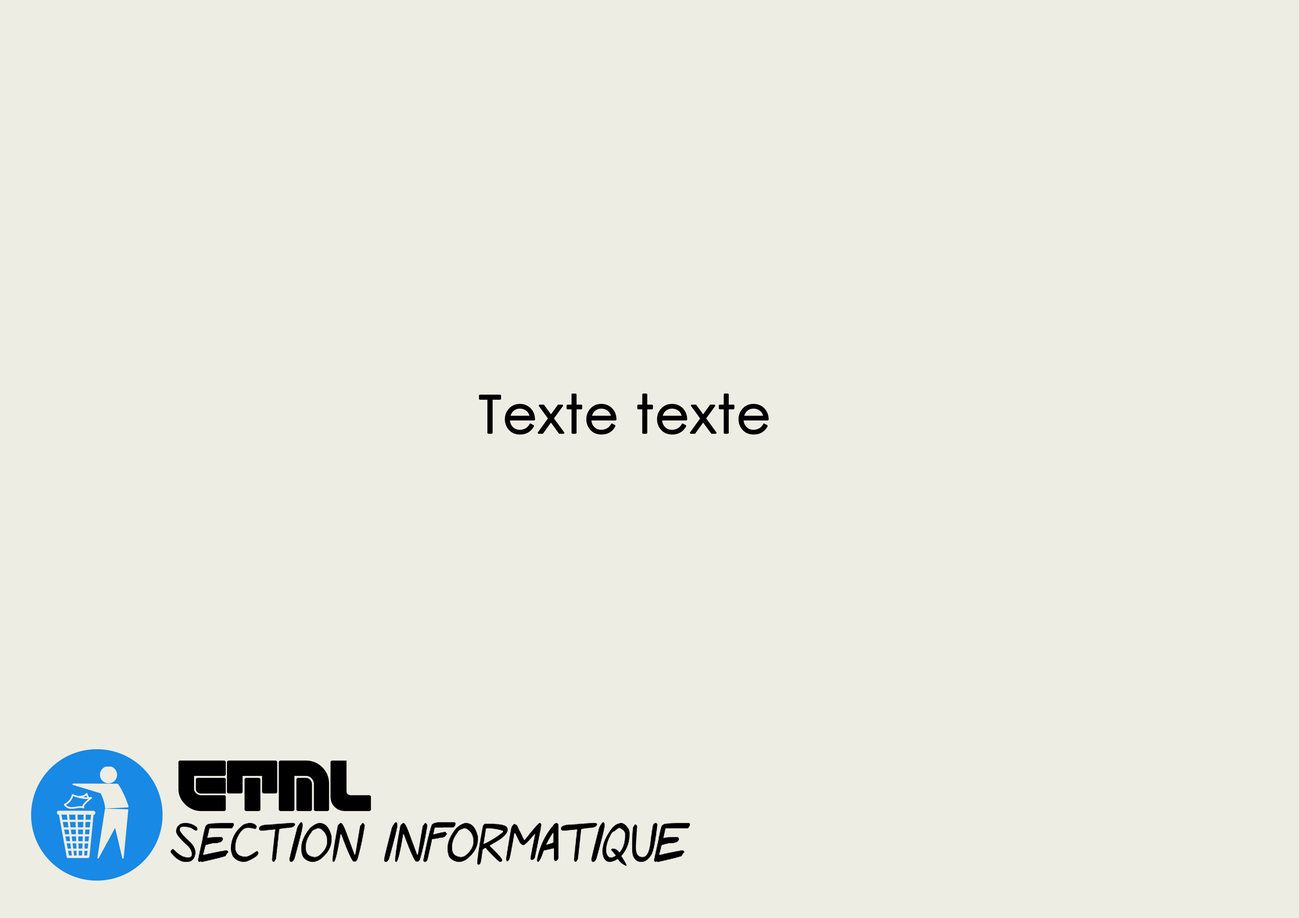
<style>
.page{position:relative;width:1299px;height:918px;background:#edede3}
.page>*{position:absolute;margin:0}
.t1{font:52.6px "CenturyGothic";color:#000000;font-weight:bold}
.t2{font:49.6px "ETML-Regular";color:#000000;font-weight:bold}
</style>
<div class="page">
<p class="t1" style="left:479px;top:394px;width:290px;height:41px">Texte texte</p>
<p class="t2" style="left:178px;top:760px;width:193px;height:52px">ETML</p>
</div>
